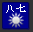
<style>
.page{position:relative;width:33px;height:32px;background:#000090}
.page>*{position:absolute;margin:0}
.t1{font:10.4px "SimSun";color:#ffffff}
</style>
<div class="page">
<p class="t1" style="left:6px;top:4px;width:20px;height:9px">八七</p>
</div>
